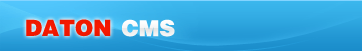
<style>
.page{position:relative;width:362px;height:51px}
.page>*{position:absolute;margin:0}
.t1{font:22px "FZCCHJW--GB1-0";color:#f11800}
.t2{font:22px "FZCCHJW--GB1-0";color:#f6f6f6}
</style>
<div class="page">
<p class="t1" style="left:26px;top:19px;width:85px;height:18px">DATON</p>
<p class="t2" style="left:122px;top:19px;width:53px;height:18px">CMS</p>
</div>
